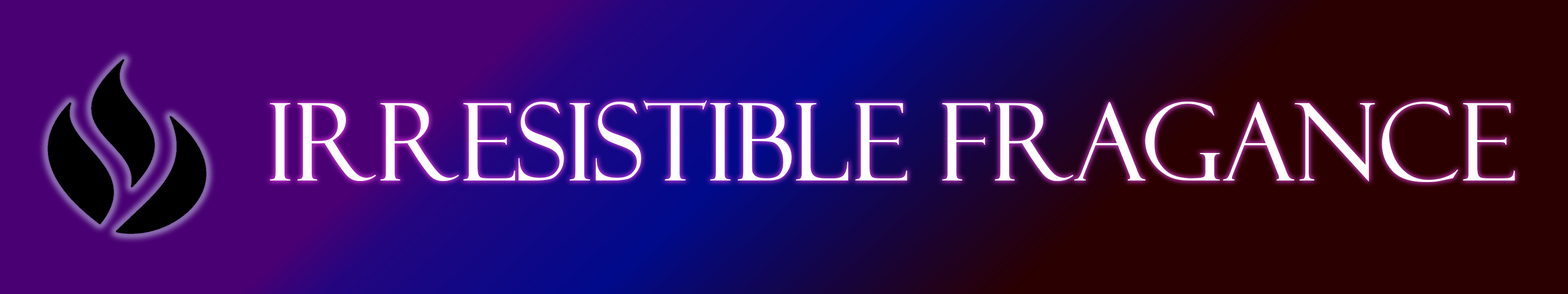
<style>
.page{position:relative;width:1568px;height:294px;background:#2a0000}
.page>*{position:absolute;margin:0}
.t1{font:107.4px "FelixTitlingMT";color:#ffffff}
</style>
<div class="page">
<p class="t1" style="left:270px;top:100px;width:1245px;height:82px">IRRESISTIBLE FRAGANCE</p>
</div>
